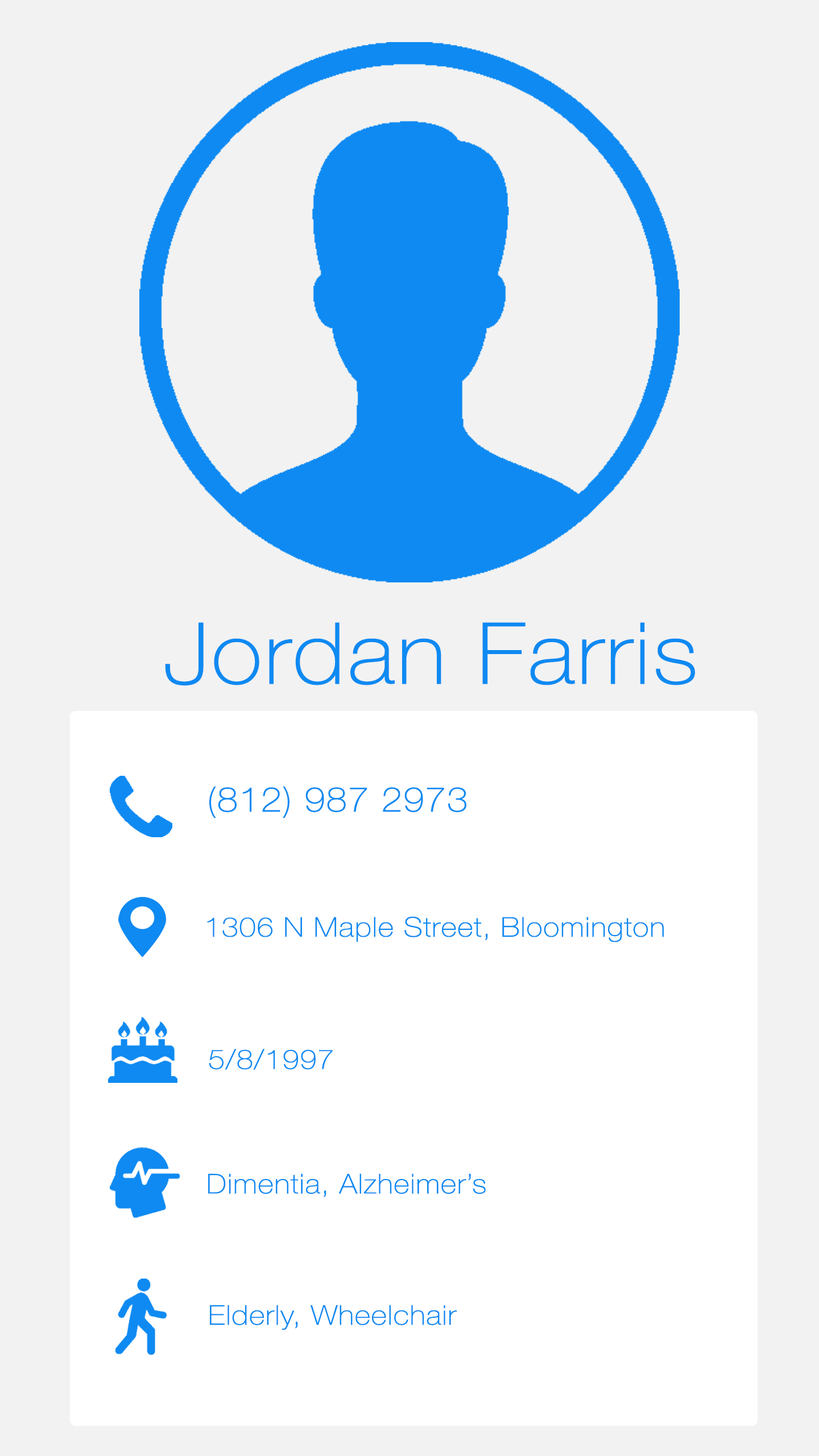
<style>
.page{position:relative;width:819px;height:1456px;background:#f2f2f2}
.page>*{position:absolute;margin:0}
.t1{font:85.3px "HelveticaNeue-Thin";color:#0e8af2;font-weight:bold;scale:1.1 1}
.t2{font:34.1px "HelveticaNeue-Thin";color:#0e8af2;font-weight:bold;scale:1.1 1}
.t3{font:27.3px "HelveticaNeue-Thin";color:#0e8af2;font-weight:bold;scale:1.1 1}
</style>
<div class="page">
<p class="t1" style="left:165px;top:622px;width:530px;height:64px">Jordan Farris</p>
<p class="t2" style="left:209px;top:786px;width:257px;height:32px">(812) 987 2973</p>
<p class="t3" style="left:207px;top:916px;width:457px;height:26px">1306 N Maple Street, Bloomington</p>
<p class="t3" style="left:209px;top:1049px;width:124px;height:21px">5/8/1997</p>
<p class="t3" style="left:208px;top:1173px;width:278px;height:24px">Dimentia, Alzheimer’s</p>
<p class="t3" style="left:210px;top:1305px;width:247px;height:25px">Elderly, Wheelchair</p>
</div>
